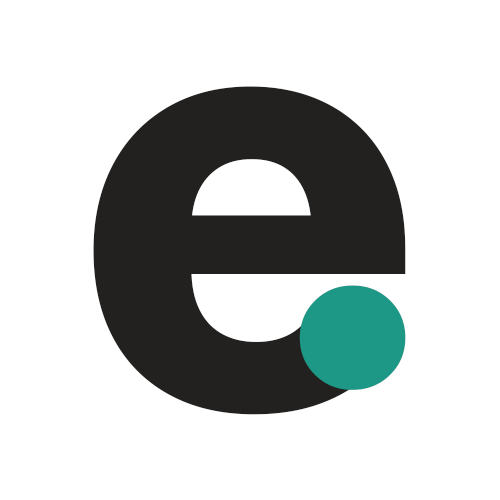
<style>
.page{position:relative;width:500px;height:500px;background:#ffffff}
.page>*{position:absolute;margin:0}
.t1{font:587.9px "Inter18pt-ExtraBold";color:#23211f}
.t2{font:571.6px "Inter18pt-ExtraBold";color:#1d9886}
</style>
<div class="page">
<p class="t1" style="left:93px;top:86px;width:313px;height:329px">e</p>
<p class="t2" style="left:299px;top:285px;width:107px;height:105px">.</p>
</div>
